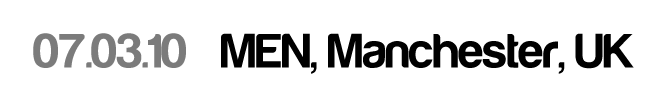
<style>
.page{position:relative;width:650px;height:100px;background:#ffffff}
.page>*{position:absolute;margin:0}
.t1{font:50px "Harabara-Bold";color:#000000}
.t2{font:50px "Harabara-Bold";color:#7b7b7b}
</style>
<div class="page">
<p class="t1" style="left:33px;top:33px;width:601px;height:41px"><span class="t2">07.03.10</span>   MEN, Manchester, UK</p>
</div>
